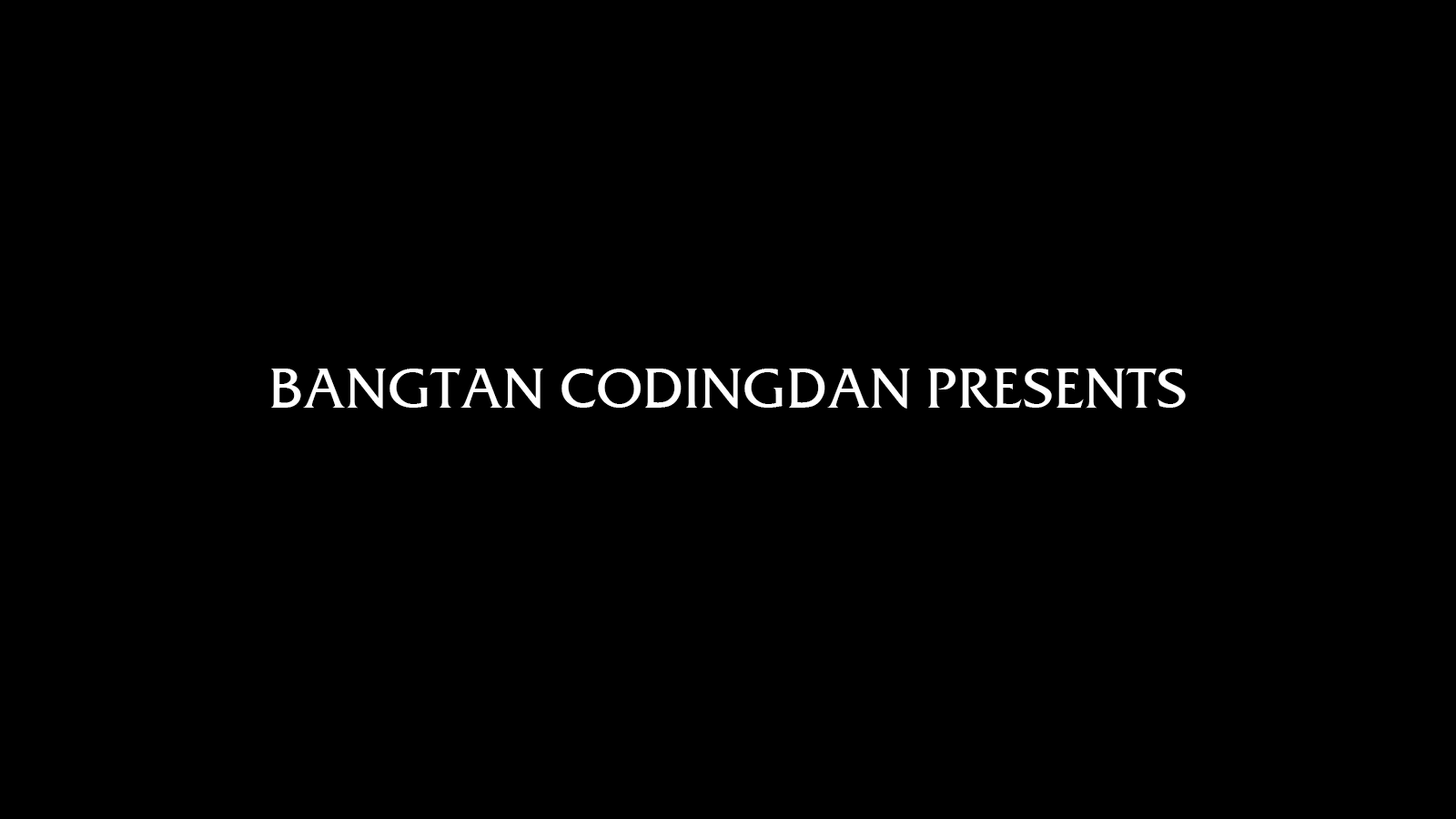
<style>
.page{position:relative;width:1456px;height:819px;background:#000000}
.page>*{position:absolute;margin:0}
.t1{font:54.6px "FrizQuadrataTT";color:#ffffff}
</style>
<div class="page">
<p class="t1" style="left:271px;top:369px;width:915px;height:40px">BANGTAN CODINGDAN PRESENTS</p>
</div>
